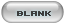
<style>
.page{position:relative;width:65px;height:24px}
.page>*{position:absolute;margin:0}
.t1{font:8px "04b09";color:#3e3e3e}
</style>
<div class="page">
<p class="t1" style="left:17px;top:11px;width:34px;height:5px">BLANK</p>
</div>
